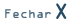
<style>
.page{position:relative;width:70px;height:22px;background:#ffffff}
.page>*{position:absolute;margin:0}
.t1{font:20px "OCRAStd";color:#264b65}
.t2{font:11.1px "OCRAStd";color:#4d6b81}
</style>
<div class="page">
<p class="t1" style="left:56px;top:3px;width:11px;height:16px">X</p>
<p class="t2" style="left:5px;top:9px;width:46px;height:9px">Fechar</p>
</div>
